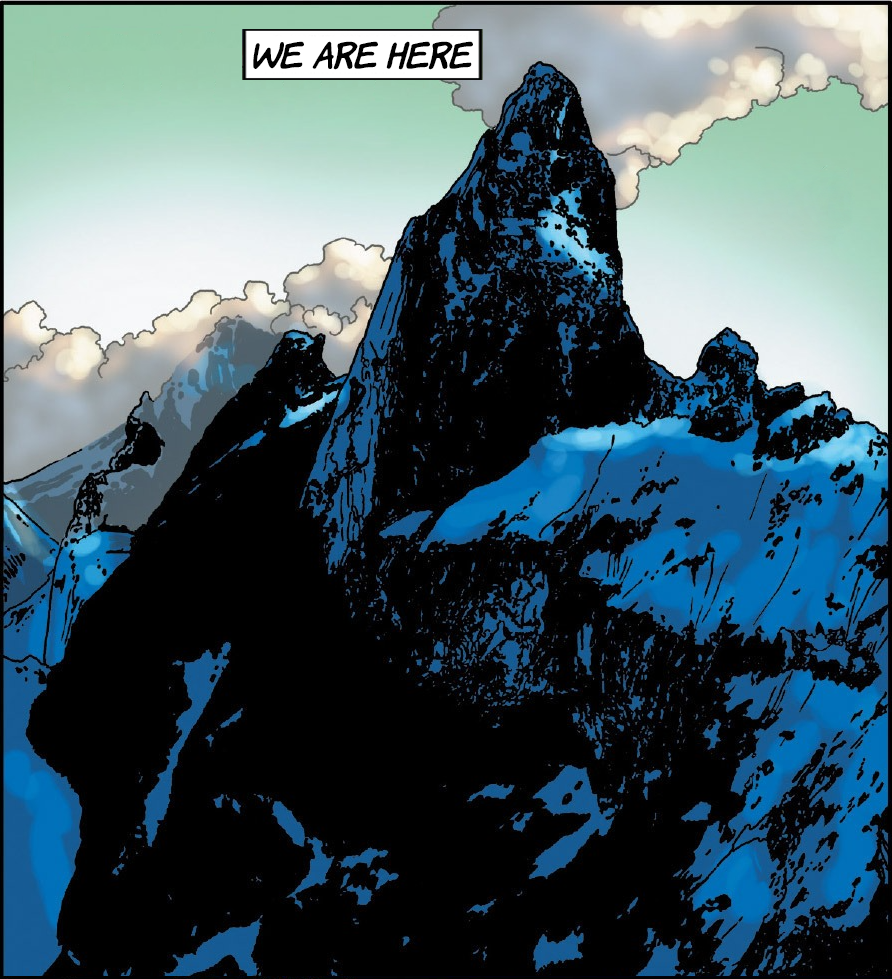
<style>
.page{position:relative;width:892px;height:979px;background:#000000}
.page>*{position:absolute;margin:0}
.t1{font:34.1px "KomikaHand-Italic";color:#010101}
</style>
<div class="page">
<p class="t1" style="left:253px;top:41px;width:220px;height:29px">we are here</p>
</div>
